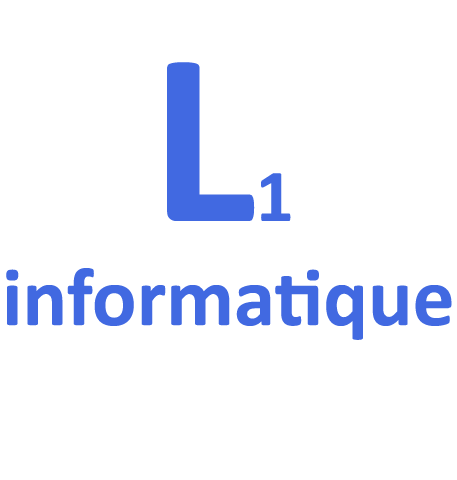
<style>
.page{position:relative;width:457px;height:480px;background:#ffffff}
.page>*{position:absolute;margin:0}
.t1{font:250px "Calibri-Bold";color:#4169e1}
.t2{font:75px "Calibri-Bold";color:#4169e1}
.t3{font:83.3px "Calibri-Bold";color:#4169e1}
</style>
<div class="page">
<p class="t1" style="left:167px;top:62px;width:124px;height:159px">L<span class="t2">1</span></p>
<p class="t3" style="left:6px;top:268px;width:446px;height:72px">informatique</p>
</div>
